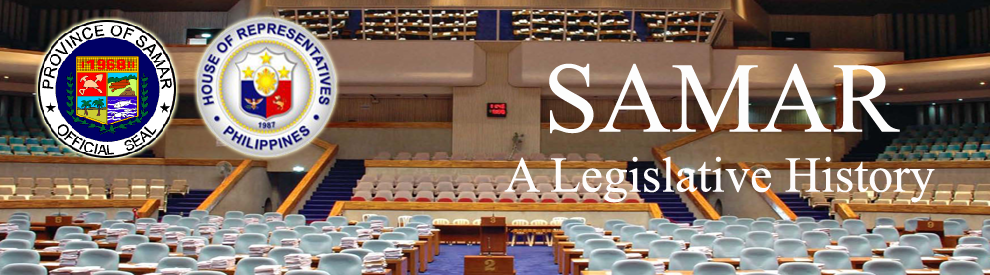
<style>
.page{position:relative;width:990px;height:275px}
.page>*{position:absolute;margin:0}
.t1{font:50px "TimesNewRomanPSMT";color:#fdfcfc}
.t2{font:100px "TimesNewRomanPSMT";color:#fdfdfd}
</style>
<div class="page">
<p class="t1" style="left:504px;top:63px;width:431px;height:140px;text-align:center"><span class="t2">SAMAR<br></span>A Legislative History</p>
</div>
